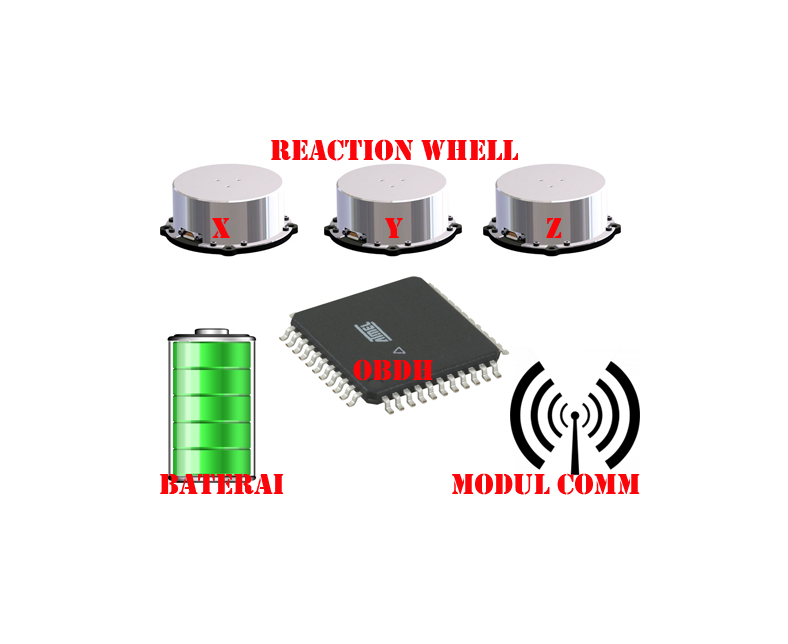
<style>
.page{position:relative;width:788px;height:644px;background:#ffffff}
.page>*{position:absolute;margin:0}
.t1{font:30px "Stencil";color:#fb050b}
</style>
<div class="page">
<p class="t1" style="left:271px;top:139px;width:247px;height:22px">reaction whell</p>
<p class="t1" style="left:212px;top:218px;width:18px;height:20px">x</p>
<p class="t1" style="left:385px;top:218px;width:18px;height:20px">y</p>
<p class="t1" style="left:546px;top:218px;width:16px;height:20px">z</p>
<p class="t1" style="left:353px;top:359px;width:80px;height:22px">obdh</p>
<p class="t1" style="left:452px;top:473px;width:188px;height:22px">modul comm</p>
<p class="t1" style="left:160px;top:474px;width:124px;height:20px">baterai</p>
</div>
